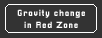
<style>
.page{position:relative;width:102px;height:38px;background:#333333}
.page>*{position:absolute;margin:0}
.t1{font:9px/12.5px "Pixellari";letter-spacing:0.075em;color:#ffffff}
</style>
<div class="page">
<p class="t1" style="left:17px;top:9px;width:68px;height:19px;text-align:center">Gravity change<br>in Red Zone</p>
</div>
